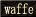
<style>
.page{position:relative;width:36px;height:17px}
.page>*{position:absolute;margin:0}
.t1{font:15.6px "MS-Mincho";color:#fff4ce;scale:0.75 1}
</style>
<div class="page">
<p class="t1" style="left:4px;top:3px;width:30px;height:11px">waffe</p>
</div>
